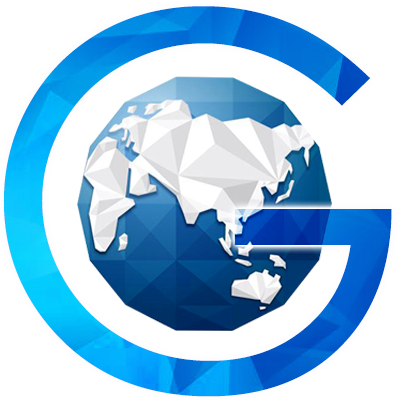
<style>
.page{position:relative;width:400px;height:400px;background:#ffffff}
.page>*{position:absolute;margin:0}
.t1{font:517.3px "CenturyGothic";letter-spacing:0.1em}
</style>
<div class="page">
<p class="t1" style="left:3px;top:6px;width:389px;height:391px">G</p>
</div>
